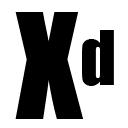
<style>
.page{position:relative;width:128px;height:128px;background:#ffffff}
.page>*{position:absolute;margin:0}
.t1{font:135px "Impact";color:#000000}
.t2{font:70px "Impact";color:#000000}
</style>
<div class="page">
<p class="t1" style="left:15px;top:12px;width:68px;height:107px">X</p>
<p class="t2" style="left:82px;top:30px;width:32px;height:56px">d</p>
</div>
